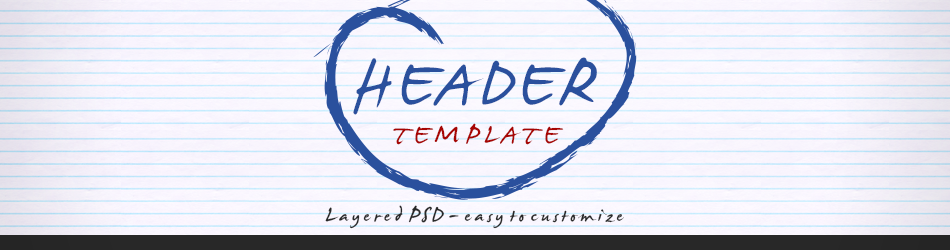
<style>
.page{position:relative;width:950px;height:250px}
.page>*{position:absolute;margin:0}
.t1{font:88.4px "JamesFajardo";color:#2a509d}
.t2{font:36.7px "JamesFajardo";letter-spacing:0.1em;color:#a70503}
.t3{font:30px "JamesFajardo";letter-spacing:0.02em;color:#282828}
</style>
<div class="page">
<p class="t1" style="left:353px;top:57px;width:244px;height:58px">HEADER</p>
<p class="t2" style="left:393px;top:123px;width:171px;height:22px">TEMPLATE</p>
<p class="t3" style="left:325px;top:205px;width:299px;height:24px">“Layered PSD - easy to customize”</p>
</div>
